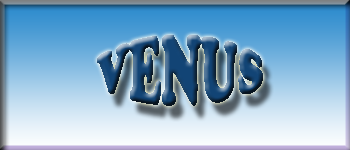
<style>
.page{position:relative;width:350px;height:150px}
.page>*{position:absolute;margin:0}
.t1{font:44px "CooperBlack"}
</style>
<div class="page">
<p class="t1" style="left:97px;top:35px;width:166px;height:71px">VENUS</p>
</div>
